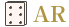
<style>
.page{position:relative;width:69px;height:27px;background:#ffffff}
.page>*{position:absolute;margin:0}
.t1{font:22px "RyuminPro-ExBold";letter-spacing:-0.04em;color:#af9441}
</style>
<div class="page">
<p class="t1" style="left:33px;top:5px;width:33px;height:17px">AR</p>
</div>
